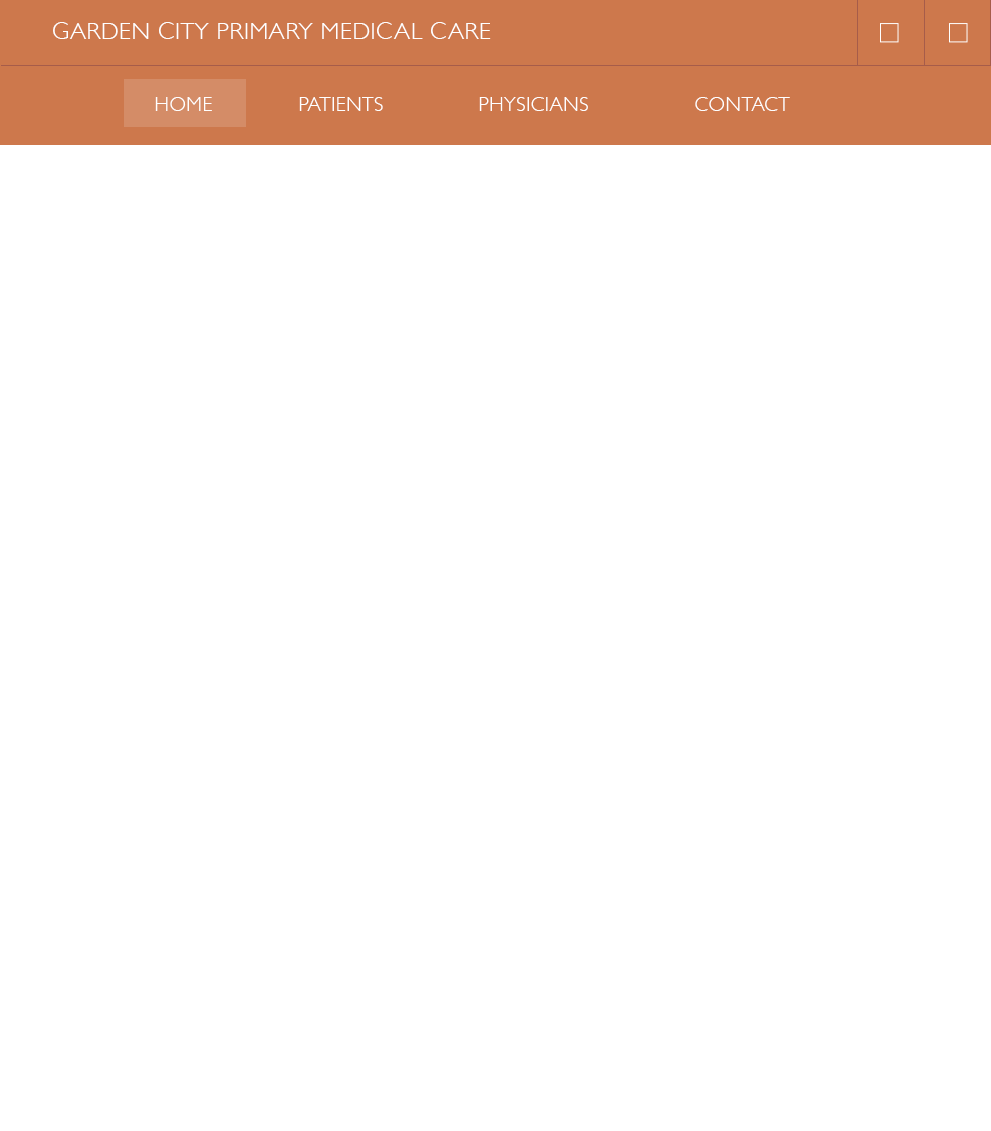
<style>
.page{position:relative;width:991px;height:1131px;background:#ffffff}
.page>*{position:absolute;margin:0}
.t1{font:24px "GillSans-Light";letter-spacing:0.025em;color:#ffffff;text-transform:uppercase}
.t2{font:20px "GillSans-Light";letter-spacing:0.025em;color:#ffffff;text-transform:uppercase}
</style>
<div class="page">
<p class="t1" style="left:53px;top:22px;width:438px;height:17px">Garden City Primary mEDICAL cARE</p>
<p class="t2" style="left:155px;top:97px;width:635px;height:14px">Home    Patients    Physicians    Contact</p>
</div>
